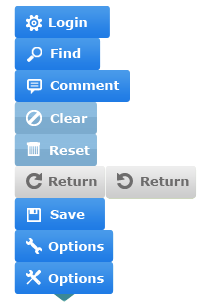
<style>
.page{position:relative;width:201px;height:305px;background:#ffffff}
.page>*{position:absolute;margin:0}
.t1{font:13px "Verdana-Bold";color:#ffffff}
.t2{font:13px "Verdana-Bold";color:#6d6c6c}
</style>
<div class="page">
<p class="t1" style="left:49px;top:17px;width:38px;height:13px">Login</p>
<p class="t1" style="left:51px;top:48px;width:30px;height:10px">Find</p>
<p class="t1" style="left:50px;top:81px;width:70px;height:9px">Comment</p>
<p class="t1" style="left:50px;top:113px;width:38px;height:10px">Clear</p>
<p class="t1" style="left:50px;top:146px;width:40px;height:9px">Reset</p>
<p class="t2" style="left:49px;top:177px;width:48px;height:9px">Return</p>
<p class="t2" style="left:141px;top:177px;width:48px;height:9px">Return</p>
<p class="t1" style="left:50px;top:210px;width:35px;height:9px">Save</p>
<p class="t1" style="left:48px;top:241px;width:56px;height:13px">Options</p>
<p class="t1" style="left:48px;top:273px;width:56px;height:13px">Options</p>
</div>
